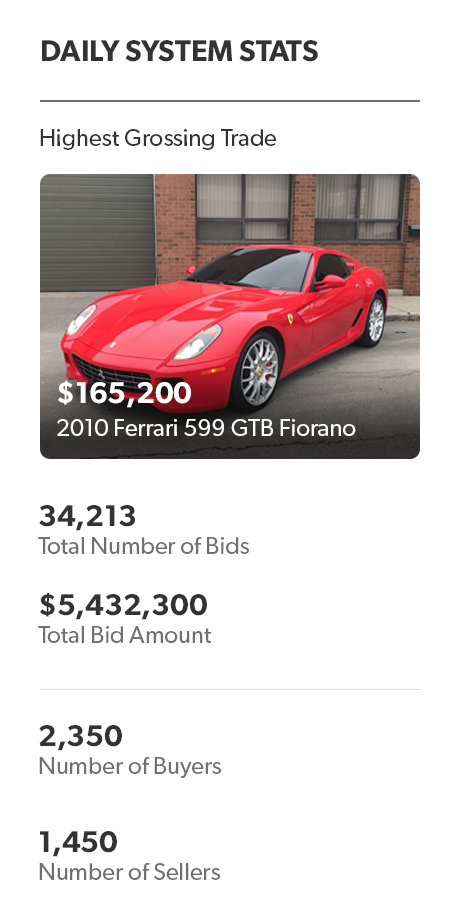
<style>
.page{position:relative;width:460px;height:920px;background:#ffffff}
.page>*{position:absolute;margin:0}
.t1{font:30px "Gibson-SemiBold";color:#333333}
.t2{font:24px "Gibson-Regular";color:#333333}
.t3{font:30px "Gibson-SemiBold";color:#ffffff}
.t4{font:24px "Gibson-Regular";color:#ffffff}
.t5{font:24px "Gibson-Regular";color:#707070}
</style>
<div class="page">
<p class="t1" style="left:42px;top:40px;width:276px;height:22px">DAILY SYSTEM STATS</p>
<p class="t2" style="left:40px;top:129px;width:236px;height:21px">Highest Grossing Trade</p>
<p class="t3" style="left:58px;top:380px;width:133px;height:28px">$165,200</p>
<p class="t4" style="left:57px;top:419px;width:299px;height:17px">2010 Ferrari 599 GTB Fiorano</p>
<p class="t1" style="left:39px;top:505px;width:96px;height:26px">34,213</p>
<p class="t5" style="left:38px;top:537px;width:211px;height:17px">Total Number of Bids</p>
<p class="t1" style="left:40px;top:592px;width:167px;height:28px">$5,432,300</p>
<p class="t5" style="left:38px;top:626px;width:173px;height:17px">Total Bid Amount</p>
<p class="t1" style="left:39px;top:725px;width:83px;height:26px">2,350</p>
<p class="t5" style="left:39px;top:757px;width:182px;height:21px">Number of Buyers</p>
<p class="t1" style="left:40px;top:831px;width:77px;height:26px">1,450</p>
<p class="t5" style="left:39px;top:863px;width:181px;height:17px">Number of Sellers</p>
</div>
